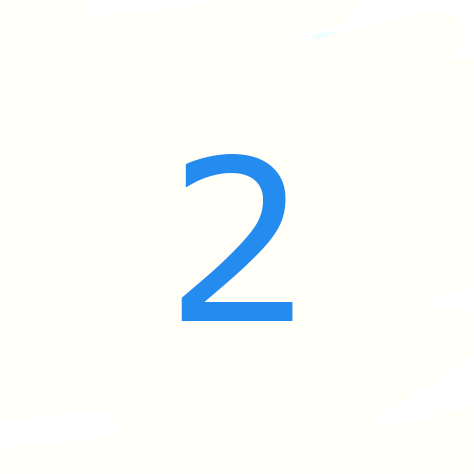
<style>
.page{position:relative;width:474px;height:474px;background:#fffff8}
.page>*{position:absolute;margin:0}
.t1{font:225.2px "Verdana";color:#248cee}
</style>
<div class="page">
<p class="t1" style="left:181px;top:154px;width:112px;height:167px">2</p>
</div>
